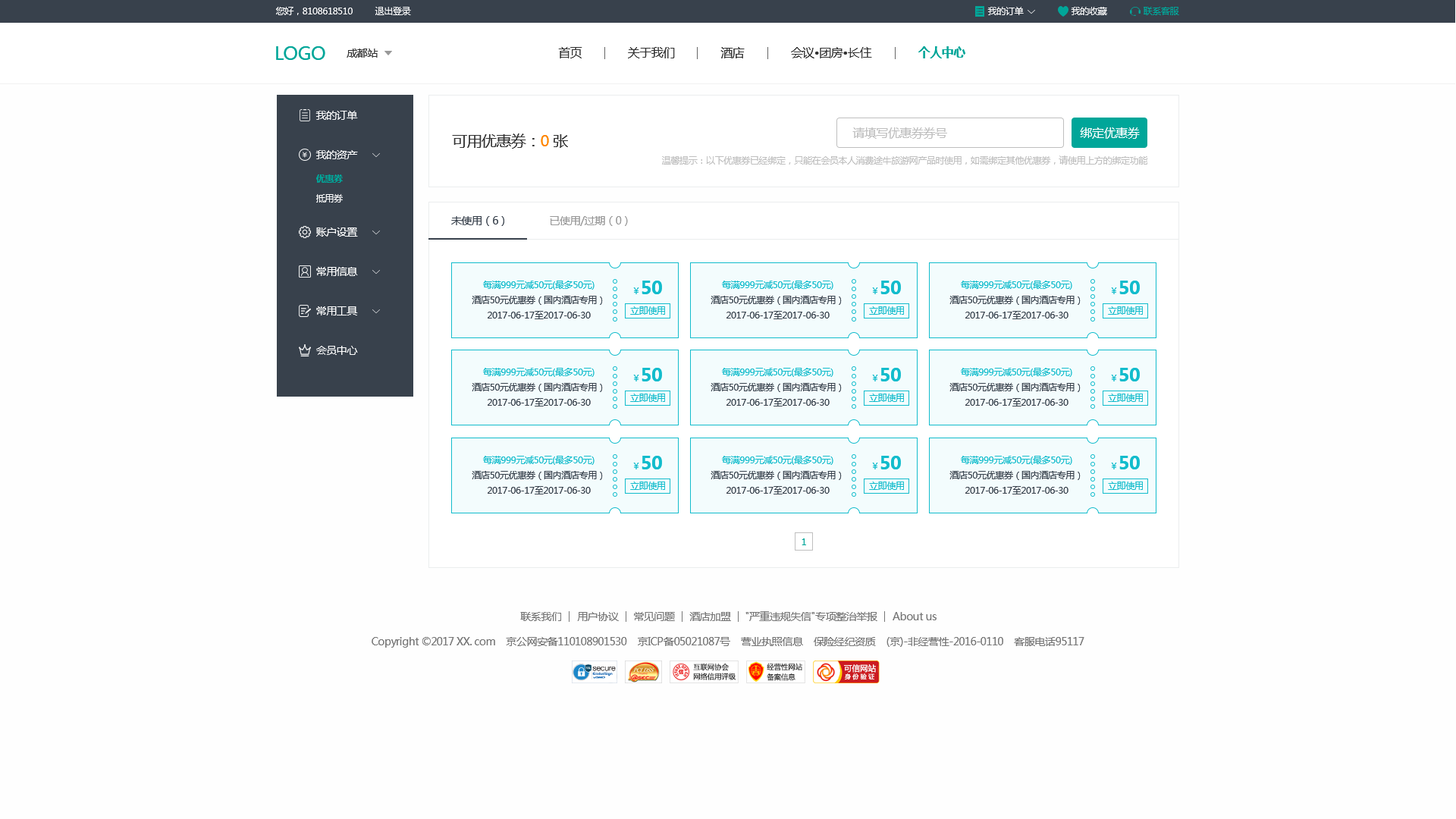
<style>
.page{position:relative;width:1456px;height:819px;background:#fefefe}
.page>*{position:absolute;margin:0}
.t1{font:9.1px "MicrosoftYaHei";letter-spacing:-0.03em;color:#ffffff}
.t2{font:9.1px "MicrosoftYaHei";letter-spacing:-0.03em;color:#00a699}
.t3{font:18.2px "MicrosoftYaHei";letter-spacing:-0.03em;color:#00a699}
.t4{font:10.6px "MicrosoftYaHei";letter-spacing:-0.03em;color:#333333}
.t5{font:12.1px "MicrosoftYaHei";letter-spacing:-0.03em;color:#333333}
.t6{font:12.1px "MicrosoftYaHei-Bold";letter-spacing:-0.03em;color:#00a699}
.t7{font:10.6px "MicrosoftYaHei";letter-spacing:-0.03em;color:#ffffff}
.t8{font:15.2px "MicrosoftYaHei";letter-spacing:-0.03em;color:#333333}
.t9{font:15.2px "MicrosoftYaHei";letter-spacing:-0.03em;color:#ff8800}
.t10{font:12.1px "MicrosoftYaHei";letter-spacing:-0.03em;color:#bfbfbf}
.t11{font:12.1px "MicrosoftYaHei";letter-spacing:-0.03em;color:#ffffff}
.t12{font:9.1px "MicrosoftYaHei";letter-spacing:-0.03em;color:#bfbfbf}
.t13{font:9.1px "MicrosoftYaHei-Bold";letter-spacing:-0.03em;color:#00a699}
.t14{font:9.1px "MicrosoftYaHei";letter-spacing:-0.03em;color:#fefefe}
.t15{font:10.6px "MicrosoftYaHei";letter-spacing:-0.03em;color:#38414c}
.t16{font:10.6px "MicrosoftYaHei";letter-spacing:-0.03em;color:#999999}
.t17{font:9.1px "MicrosoftYaHei";letter-spacing:-0.03em;color:#12bccc}
.t18{font:18.2px "MicrosoftYaHei-Bold";letter-spacing:-0.03em;color:#12bccc}
.t19{font:9.1px "MicrosoftYaHei";letter-spacing:-0.03em;color:#38414c}
.t20{font:10.6px "MicrosoftYaHei";letter-spacing:-0.03em;color:#777777}
</style>
<div class="page">
<p class="t1" style="left:276px;top:7px;width:77px;height:8px">您好，8108618510</p>
<p class="t1" style="left:375px;top:7px;width:36px;height:8px">退出登录</p>
<p class="t1" style="left:987px;top:7px;width:37px;height:8px">我的订单</p>
<p class="t1" style="left:1071px;top:7px;width:36px;height:8px">我的收藏</p>
<p class="t2" style="left:1144px;top:7px;width:35px;height:8px">联系客服</p>
<p class="t3" style="left:276px;top:46px;width:49px;height:14px">LOGO</p>
<p class="t4" style="left:347px;top:49px;width:31px;height:9px">成都站</p>
<p class="t5" style="left:558px;top:47px;width:24px;height:11px">首页</p>
<p class="t5" style="left:628px;top:47px;width:47px;height:11px">关于我们</p>
<p class="t5" style="left:720px;top:47px;width:25px;height:11px">酒店</p>
<p class="t5" style="left:791px;top:47px;width:81px;height:11px">会议•团房•长住</p>
<p class="t6" style="left:918px;top:46px;width:47px;height:12px">个人中心</p>
<p class="t7" style="left:315px;top:111px;width:43px;height:9px">我的订单</p>
<p class="t8" style="left:452px;top:133px;width:116px;height:16px">可用优惠券：<span class="t9">0</span> 张</p>
<p class="t10" style="left:852px;top:127px;width:95px;height:12px">请填写优惠券券号</p>
<p class="t11" style="left:1080px;top:127px;width:60px;height:12px">绑定优惠券</p>
<p class="t7" style="left:315px;top:150px;width:43px;height:9px">我的资产</p>
<p class="t12" style="left:662px;top:155px;width:485px;height:10px">温馨提示：以下优惠券已经绑定，只能在会员本人消费途牛旅游网产品时使用，如需绑定其他优惠券，请使用上方的绑定功能</p>
<p class="t13" style="left:316px;top:174px;width:27px;height:9px">优惠券</p>
<p class="t14" style="left:316px;top:194px;width:27px;height:8px">抵用券</p>
<p class="t15" style="left:451px;top:216px;width:53px;height:10px">未使用（6）</p>
<p class="t16" style="left:550px;top:216px;width:78px;height:10px">已使用/过期（0）</p>
<p class="t7" style="left:316px;top:227px;width:42px;height:10px">账户设置</p>
<p class="t7" style="left:316px;top:267px;width:42px;height:9px">常用信息</p>
<p class="t17" style="left:483px;top:281px;width:112px;height:9px"><span class="t4"><br></span>每满999元减50元(最多50元)</p>
<p class="t18" style="left:633px;top:281px;width:29px;height:13px"><span class="t17">￥</span>50</p>
<p class="t17" style="left:722px;top:281px;width:111px;height:9px"><span class="t4"><br></span>每满999元减50元(最多50元)</p>
<p class="t18" style="left:872px;top:281px;width:29px;height:13px"><span class="t17">￥</span>50</p>
<p class="t17" style="left:961px;top:281px;width:111px;height:9px"><span class="t4"><br></span>每满999元减50元(最多50元)</p>
<p class="t18" style="left:1111px;top:281px;width:29px;height:13px"><span class="t17">￥</span>50</p>
<p class="t19" style="left:472px;top:296px;width:131px;height:9px"><span class="t4"><br></span>酒店50元优惠券（国内酒店专用）</p>
<p class="t19" style="left:711px;top:296px;width:131px;height:9px"><span class="t4"><br></span>酒店50元优惠券（国内酒店专用）</p>
<p class="t19" style="left:949px;top:296px;width:132px;height:9px"><span class="t4"><br></span>酒店50元优惠券（国内酒店专用）</p>
<p class="t7" style="left:316px;top:306px;width:42px;height:9px">常用工具</p>
<p class="t19" style="left:488px;top:311px;width:103px;height:8px"><span class="t15"><br></span>2017-06-17至2017-06-30</p>
<p class="t17" style="left:630px;top:306px;width:35px;height:9px">立即使用</p>
<p class="t19" style="left:726px;top:311px;width:104px;height:8px"><span class="t15"><br></span>2017-06-17至2017-06-30</p>
<p class="t17" style="left:869px;top:306px;width:35px;height:9px">立即使用</p>
<p class="t19" style="left:965px;top:311px;width:103px;height:8px"><span class="t15"><br></span>2017-06-17至2017-06-30</p>
<p class="t17" style="left:1108px;top:306px;width:35px;height:9px">立即使用</p>
<p class="t7" style="left:316px;top:346px;width:42px;height:9px">会员中心</p>
<p class="t17" style="left:483px;top:368px;width:112px;height:9px"><span class="t4"><br></span>每满999元减50元(最多50元)</p>
<p class="t18" style="left:633px;top:368px;width:29px;height:13px"><span class="t17">￥</span>50</p>
<p class="t17" style="left:722px;top:368px;width:111px;height:9px"><span class="t4"><br></span>每满999元减50元(最多50元)</p>
<p class="t18" style="left:872px;top:368px;width:29px;height:13px"><span class="t17">￥</span>50</p>
<p class="t17" style="left:961px;top:368px;width:111px;height:9px"><span class="t4"><br></span>每满999元减50元(最多50元)</p>
<p class="t18" style="left:1111px;top:368px;width:29px;height:13px"><span class="t17">￥</span>50</p>
<p class="t19" style="left:472px;top:383px;width:131px;height:9px"><span class="t4"><br></span>酒店50元优惠券（国内酒店专用）</p>
<p class="t19" style="left:711px;top:383px;width:131px;height:9px"><span class="t4"><br></span>酒店50元优惠券（国内酒店专用）</p>
<p class="t19" style="left:949px;top:383px;width:132px;height:9px"><span class="t4"><br></span>酒店50元优惠券（国内酒店专用）</p>
<p class="t19" style="left:488px;top:398px;width:103px;height:8px"><span class="t15"><br></span>2017-06-17至2017-06-30</p>
<p class="t17" style="left:630px;top:394px;width:35px;height:8px">立即使用</p>
<p class="t19" style="left:726px;top:398px;width:104px;height:8px"><span class="t15"><br></span>2017-06-17至2017-06-30</p>
<p class="t17" style="left:869px;top:394px;width:35px;height:8px">立即使用</p>
<p class="t19" style="left:965px;top:398px;width:103px;height:8px"><span class="t15"><br></span>2017-06-17至2017-06-30</p>
<p class="t17" style="left:1108px;top:394px;width:35px;height:8px">立即使用</p>
<p class="t17" style="left:483px;top:456px;width:112px;height:9px"><span class="t4"><br></span>每满999元减50元(最多50元)</p>
<p class="t18" style="left:633px;top:456px;width:29px;height:13px"><span class="t17">￥</span>50</p>
<p class="t17" style="left:722px;top:456px;width:111px;height:9px"><span class="t4"><br></span>每满999元减50元(最多50元)</p>
<p class="t18" style="left:872px;top:456px;width:29px;height:13px"><span class="t17">￥</span>50</p>
<p class="t17" style="left:961px;top:456px;width:111px;height:9px"><span class="t4"><br></span>每满999元减50元(最多50元)</p>
<p class="t18" style="left:1111px;top:456px;width:29px;height:13px"><span class="t17">￥</span>50</p>
<p class="t19" style="left:472px;top:471px;width:131px;height:9px"><span class="t4"><br></span>酒店50元优惠券（国内酒店专用）</p>
<p class="t19" style="left:711px;top:471px;width:131px;height:9px"><span class="t4"><br></span>酒店50元优惠券（国内酒店专用）</p>
<p class="t19" style="left:949px;top:471px;width:132px;height:9px"><span class="t4"><br></span>酒店50元优惠券（国内酒店专用）</p>
<p class="t17" style="left:630px;top:482px;width:35px;height:8px">立即使用</p>
<p class="t17" style="left:869px;top:482px;width:35px;height:8px">立即使用</p>
<p class="t17" style="left:1108px;top:482px;width:35px;height:8px">立即使用</p>
<p class="t19" style="left:488px;top:486px;width:103px;height:8px"><span class="t15"><br></span>2017-06-17至2017-06-30</p>
<p class="t19" style="left:726px;top:486px;width:104px;height:8px"><span class="t15"><br></span>2017-06-17至2017-06-30</p>
<p class="t19" style="left:965px;top:486px;width:103px;height:8px"><span class="t15"><br></span>2017-06-17至2017-06-30</p>
<p class="t2" style="left:802px;top:538px;width:4px;height:7px">1</p>
<p class="t20" style="left:520px;top:612px;width:41px;height:9px">联系我们</p>
<p class="t20" style="left:577px;top:612px;width:42px;height:9px">用户协议</p>
<p class="t20" style="left:634px;top:612px;width:41px;height:9px">常见问题</p>
<p class="t20" style="left:689px;top:612px;width:42px;height:9px">酒店加盟</p>
<p class="t20" style="left:745px;top:611px;width:132px;height:10px">"严重违规失信"专项整治举报</p>
<p class="t20" style="left:893px;top:612px;width:44px;height:8px">About us</p>
<p class="t20" style="left:372px;top:637px;width:712px;height:11px">Copyright ©2017 XX. com    京公网安备110108901530    京ICP备05021087号    营业执照信息    保险经纪资质    (京)-非经营性-2016-0110    客服电话95117</p>
</div>
